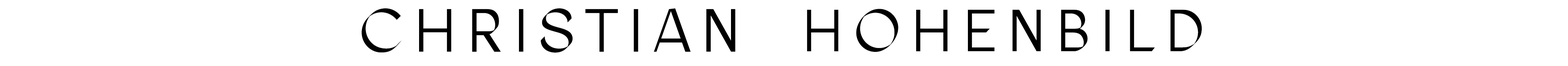
<style>
.page{position:relative;width:1568px;height:66px;background:#ffffff}
.page>*{position:absolute;margin:0}
.t1{font:61px "GTFAgenturTRIAL-Regular";letter-spacing:0.15em;color:#000000}
.t2{font:59.4px "GTFAgenturTRIAL-Regular";letter-spacing:0.15em;color:#000000}
</style>
<div class="page">
<p class="t1" style="left:362px;top:8px;width:374px;height:45px">CHRISTIAN</p>
<p class="t2" style="left:807px;top:9px;width:395px;height:43px">HOHENBILD</p>
</div>
